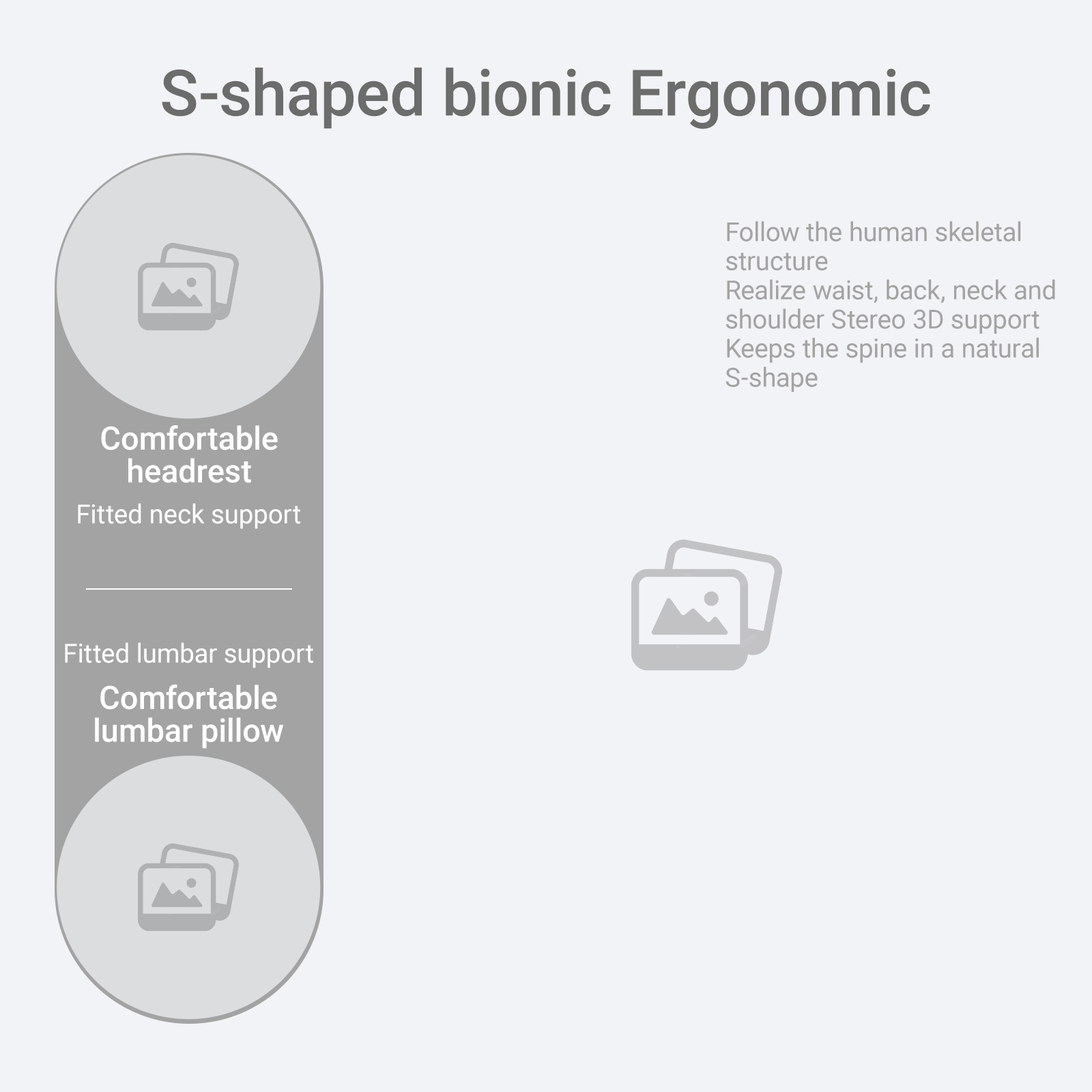
<style>
.page{position:relative;width:1092px;height:1092px;background:#f2f3f6}
.page>*{position:absolute;margin:0}
.t1{font:64.1px "Roboto-Medium";color:#6c6c6c}
.t2{font:26.2px/29.1px "Roboto-Regular";color:#a3a3a3}
.t3{font:32px/32.8px "Roboto-Medium";color:#ffffff}
.t4{font:26.2px "Roboto-Regular";color:#ffffff}
</style>
<div class="page">
<p class="t1" style="left:162px;top:68px;width:768px;height:61px">S-shaped bionic Ergonomic</p>
<p class="t2" style="left:725px;top:221px;width:330px;height:171px">Follow the human skeletal structure<br>Realize waist, back, neck and<br>shoulder Stereo 3D support<br>Keeps the spine in a natural S-shape</p>
<p class="t3" style="left:101px;top:425px;width:177px;height:58px;text-align:center">Comfortable<br>headrest</p>
<p class="t4" style="left:78px;top:503px;width:222px;height:26px">Fitted neck support</p>
<p class="t4" style="left:65px;top:642px;width:248px;height:26px">Fitted lumbar support</p>
<p class="t3" style="left:95px;top:685px;width:188px;height:64px;text-align:center">Comfortable<br>lumbar pillow</p>
</div>
